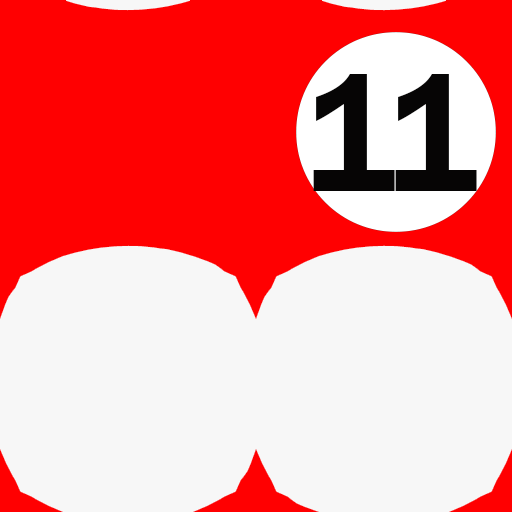
<style>
.page{position:relative;width:512px;height:512px;background:#f7f7f7}
.page>*{position:absolute;margin:0}
.t1{font:172.5px "FranklinGothic-Demi";letter-spacing:-0.05em;color:#060505;scale:0.87 1}
</style>
<div class="page">
<p class="t1" style="left:313px;top:74px;width:164px;height:117px">11</p>
</div>
